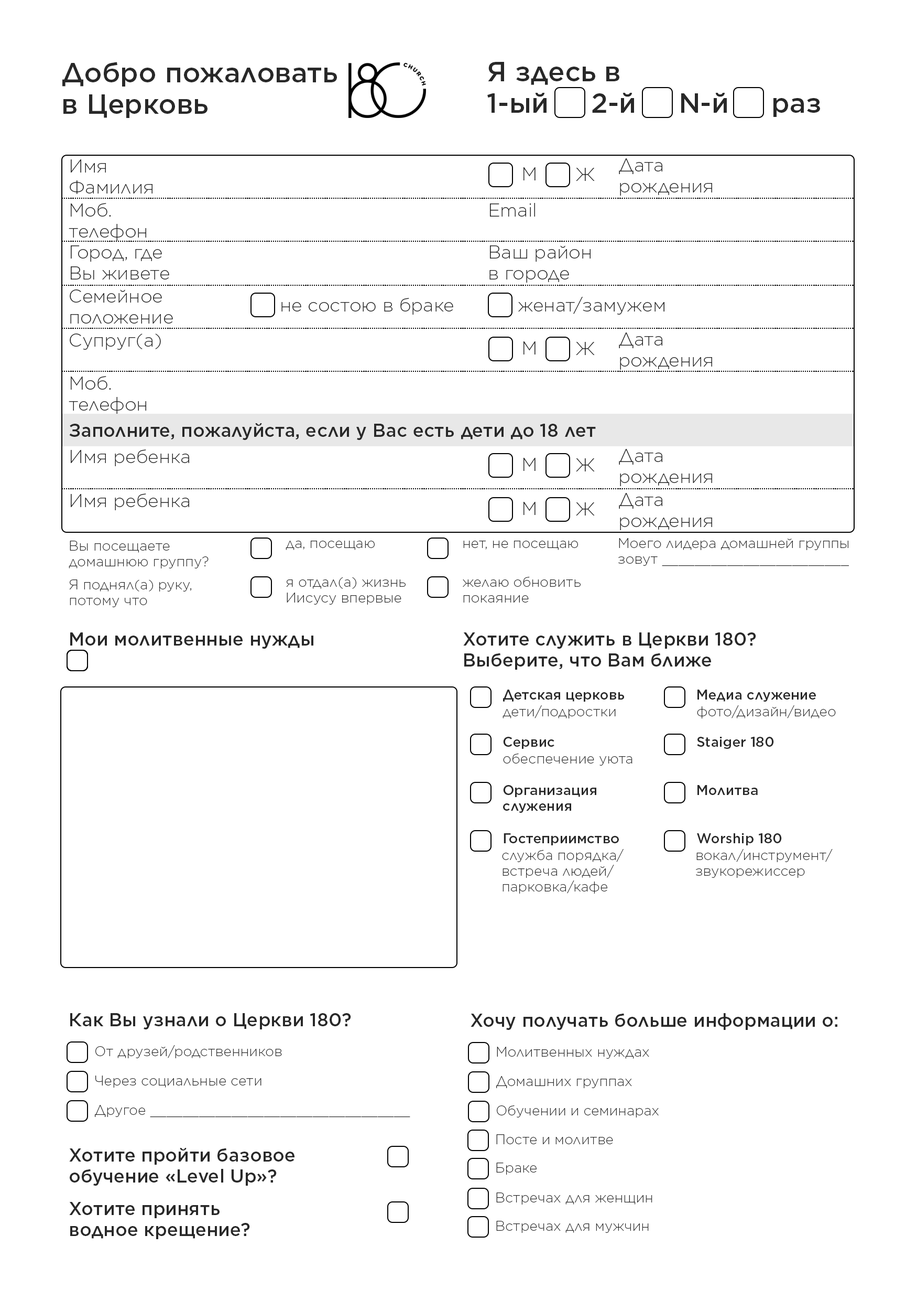
<style>
.page{position:relative;width:917px;height:1300px;background:#ffffff}
.page>*{position:absolute;margin:0}
.t1{font:26.2px "GothamSSm-Medium";color:#282828}
.t2{font:17.5px "GothamSSm-ExtraLight";color:#282828}
.t3{font:17.5px "GothamSSm-Medium";color:#282828}
.t4{font:13.1px "GothamSSm-ExtraLight";color:#282828}
.t5{font:13.1px "GothamSSm-Medium";color:#282828}
</style>
<div class="page">
<p class="t1" style="left:62px;top:62px;width:275px;height:56px">Добро пожаловать<br>в Церковь</p>
<p class="t1" style="left:488px;top:62px;width:332px;height:55px">Я здесь в<br>1-ый     2-й     N-й     раз</p>
<p class="t2" style="left:70px;top:159px;width:83px;height:35px">Имя<br>Фамилия</p>
<p class="t2" style="left:619px;top:158px;width:93px;height:38px">Дата<br>рождения</p>
<p class="t2" style="left:524px;top:167px;width:12px;height:13px">М</p>
<p class="t2" style="left:576px;top:168px;width:19px;height:13px">Ж</p>
<p class="t2" style="left:69px;top:203px;width:77px;height:38px">Моб.<br>телефон</p>
<p class="t2" style="left:490px;top:203px;width:45px;height:14px">Email</p>
<p class="t2" style="left:71px;top:245px;width:98px;height:34px">Город, где<br>Вы живете</p>
<p class="t2" style="left:490px;top:245px;width:101px;height:38px">Ваш район<br>в городе</p>
<p class="t2" style="left:70px;top:289px;width:103px;height:34px">Семейное<br>положение</p>
<p class="t2" style="left:282px;top:298px;width:171px;height:17px">не состою в браке</p>
<p class="t2" style="left:519px;top:297px;width:146px;height:18px">женат/замужем</p>
<p class="t2" style="left:70px;top:333px;width:91px;height:17px">Супруг(а)</p>
<p class="t2" style="left:524px;top:341px;width:12px;height:13px">М</p>
<p class="t2" style="left:576px;top:342px;width:19px;height:13px">Ж</p>
<p class="t2" style="left:619px;top:332px;width:93px;height:38px">Дата<br>рождения</p>
<p class="t2" style="left:69px;top:376px;width:77px;height:38px">Моб.<br>телефон</p>
<p class="t3" style="left:69px;top:423px;width:527px;height:17px">Заполните, пожалуйста, если у Вас есть дети до 18 лет</p>
<p class="t2" style="left:71px;top:449px;width:118px;height:17px">Имя ребенка</p>
<p class="t2" style="left:619px;top:449px;width:93px;height:37px">Дата<br>рождения</p>
<p class="t2" style="left:524px;top:458px;width:12px;height:13px">М</p>
<p class="t2" style="left:576px;top:458px;width:19px;height:13px">Ж</p>
<p class="t2" style="left:71px;top:493px;width:118px;height:17px">Имя ребенка</p>
<p class="t2" style="left:619px;top:493px;width:93px;height:37px">Дата<br>рождения</p>
<p class="t2" style="left:524px;top:502px;width:12px;height:13px">М</p>
<p class="t2" style="left:576px;top:502px;width:19px;height:13px">Ж</p>
<p class="t4" style="left:69px;top:541px;width:140px;height:27px">Вы посещаете<br>домашнюю группу?</p>
<p class="t4" style="left:286px;top:541px;width:89px;height:9px">да, посещаю</p>
<p class="t4" style="left:463px;top:541px;width:115px;height:9px">нет, не посещаю</p>
<p class="t4" style="left:619px;top:538px;width:230px;height:28px">Моего лидера домашней группы<br>зовут _______________________</p>
<p class="t4" style="left:69px;top:579px;width:122px;height:28px">Я поднял(а) руку,<br>потому что</p>
<p class="t4" style="left:286px;top:577px;width:120px;height:27px">я отдал(а) жизнь<br>Иисусу впервые</p>
<p class="t4" style="left:463px;top:576px;width:118px;height:26px">желаю обновить<br>покаяние</p>
<p class="t3" style="left:70px;top:632px;width:244px;height:17px">Мои молитвенные нужды</p>
<p class="t3" style="left:463px;top:632px;width:294px;height:37px">Хотите служить в Церкви 180?<br>Выберите, что Вам ближе</p>
<p class="t5" style="left:503px;top:689px;width:121px;height:12px">Детская церковь</p>
<p class="t5" style="left:698px;top:689px;width:118px;height:12px">Медиа служение</p>
<p class="t4" style="left:503px;top:705px;width:113px;height:13px">дети/подростки</p>
<p class="t4" style="left:697px;top:705px;width:139px;height:13px">фото/дизайн/видео</p>
<p class="t5" style="left:503px;top:737px;width:52px;height:12px">Сервис</p>
<p class="t5" style="left:697px;top:737px;width:77px;height:12px">Staiger 180</p>
<p class="t4" style="left:503px;top:753px;width:130px;height:12px">обеспечение уюта</p>
<p class="t5" style="left:503px;top:785px;width:94px;height:28px">Организация<br>служения</p>
<p class="t5" style="left:698px;top:785px;width:60px;height:10px">Молитва</p>
<p class="t5" style="left:504px;top:833px;width:115px;height:12px">Гостеприимство</p>
<p class="t5" style="left:697px;top:833px;width:85px;height:12px">Worship 180</p>
<p class="t4" style="left:502px;top:849px;width:122px;height:44px">служба порядка/<br>встреча людей/<br>парковка/кафе</p>
<p class="t4" style="left:696px;top:849px;width:137px;height:29px">вокал/инструмент/<br>звукорежиссер</p>
<p class="t3" style="left:70px;top:1013px;width:281px;height:16px">Как Вы узнали о Церкви 180?</p>
<p class="t3" style="left:471px;top:1013px;width:367px;height:17px">Хочу получать больше информации о:</p>
<p class="t4" style="left:95px;top:1045px;width:187px;height:13px">От друзей/родственников</p>
<p class="t4" style="left:497px;top:1046px;width:153px;height:13px">Молитвенных нуждах</p>
<p class="t4" style="left:95px;top:1075px;width:167px;height:12px">Через социальные сети</p>
<p class="t4" style="left:496px;top:1076px;width:136px;height:12px">Домашних группах</p>
<p class="t4" style="left:95px;top:1105px;width:316px;height:12px">Другое ________________________________</p>
<p class="t4" style="left:497px;top:1105px;width:162px;height:12px">Обучении и семинарах</p>
<p class="t4" style="left:496px;top:1134px;width:117px;height:10px">Посте и молитве</p>
<p class="t3" style="left:69px;top:1148px;width:226px;height:37px">Хотите пройти базовое<br>обучение «Level Up»?</p>
<p class="t4" style="left:496px;top:1162px;width:41px;height:12px">Браке</p>
<p class="t4" style="left:496px;top:1192px;width:157px;height:12px">Встречах для женщин</p>
<p class="t3" style="left:69px;top:1202px;width:181px;height:37px">Хотите принять<br>водное крещение?</p>
<p class="t4" style="left:496px;top:1221px;width:153px;height:12px">Встречах для мужчин</p>
</div>
